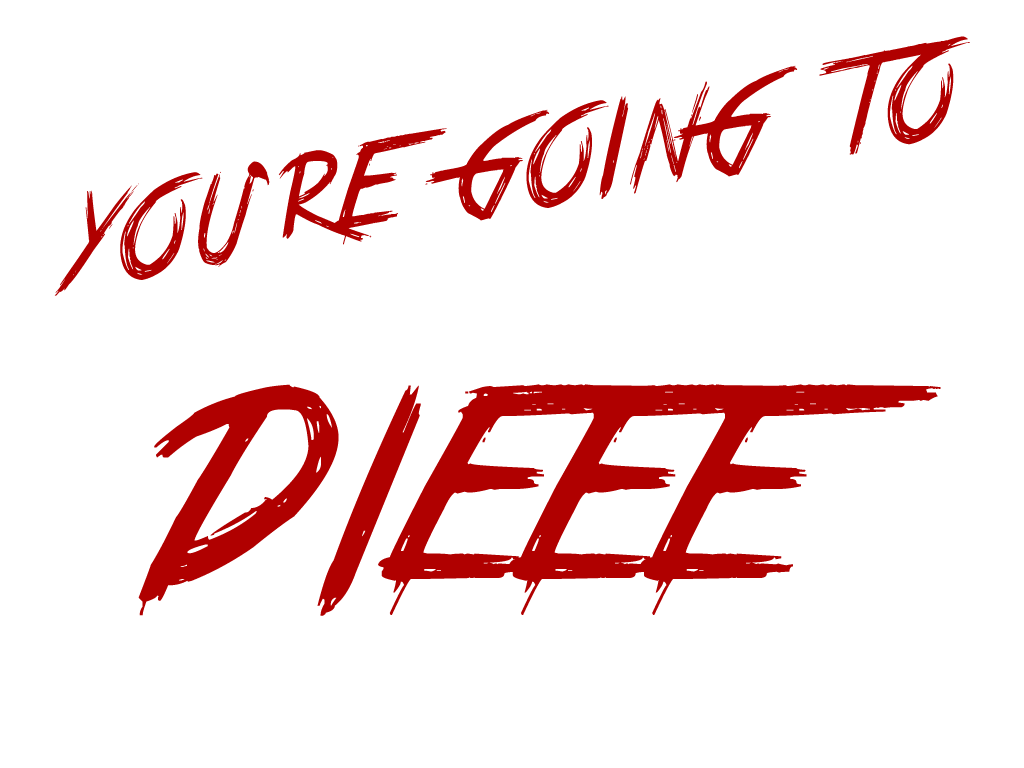
<style>
.page{position:relative;width:1024px;height:768px;background:#ffffff}
.page>*{position:absolute;margin:0}
.t1{font:93.8px "TrueLiesRUSBYLYAJKA";letter-spacing:0.05em;color:#b00000}
.t2{font:221.8px "TrueLiesRUSBYLYAJKA";letter-spacing:0.05em;color:#b00000}
</style>
<div class="page">
<p class="t1" style="left:54px;top:36px;width:916px;height:260px;rotate:-10deg">YOU’RE GOING TO</p>
<p class="t2" style="left:138px;top:384px;width:803px;height:232px">DIEEE</p>
</div>
